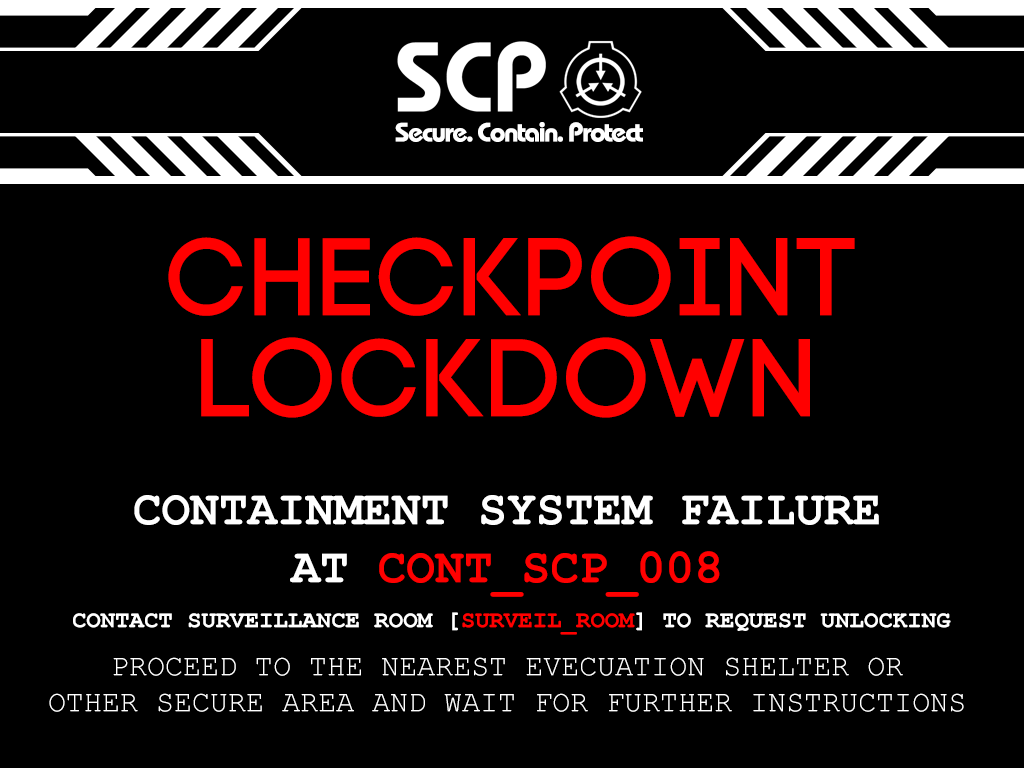
<style>
.page{position:relative;width:1024px;height:768px;background:#000000}
.page>*{position:absolute;margin:0}
.t1{font:27px "BauhausBold";color:#ffffff}
.t2{font:110px "MyriadPro-Regular";color:#ff0000}
.t3{font:48px "CourierNewPS-BoldMT";color:#ffffff}
.t4{font:48px "CourierNewPS-BoldMT";color:#ff0000}
.t5{font:24px "CourierNewPS-BoldMT";color:#ffffff}
.t6{font:24px "CourierNewPS-BoldMT";color:#ff0000}
.t7{font:30px "CourierNewPSMT";color:#ffffff}
</style>
<div class="page">
<p class="t1" style="left:395px;top:122px;width:248px;height:20px">Secure. Contain. Protect</p>
<p class="t2" style="left:168px;top:236px;width:687px;height:81px">CHECKPOINT</p>
<p class="t2" style="left:201px;top:337px;width:609px;height:81px">LOCKDOWN</p>
<p class="t3" style="left:134px;top:495px;width:745px;height:30px">CONTAINMENT SYSTEM FAILURE</p>
<p class="t4" style="left:290px;top:551px;width:430px;height:46px"><span class="t3">AT </span>CONT_SCP_008</p>
<p class="t5" style="left:73px;top:612px;width:878px;height:23px">CONTACT SURVEILLANCE ROOM [<span class="t6">SURVEIL_ROOM</span>] TO REQUEST UNLOCKING</p>
<p class="t7" style="left:49px;top:657px;width:915px;height:55px;text-align:center">PROCEED TO THE NEAREST EVECUATION SHELTER OR<br>OTHER SECURE AREA AND WAIT FOR FURTHER INSTRUCTIONS</p>
</div>
